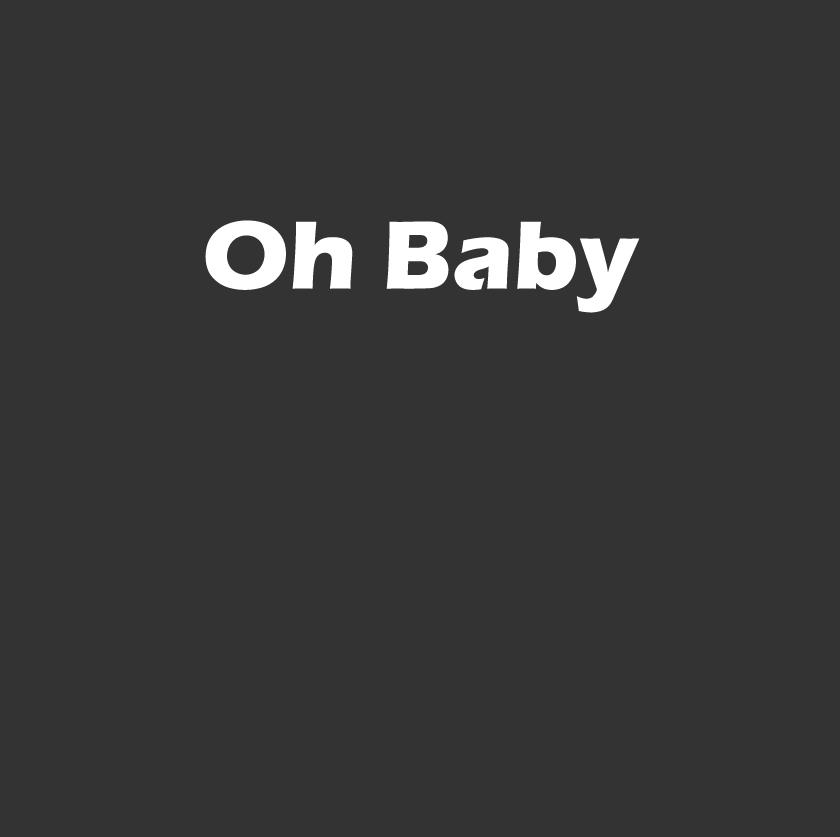
<style>
.page{position:relative;width:840px;height:837px;background:#333333}
.page>*{position:absolute;margin:0}
.t1{font:100px "ErasITC-Bold";color:#ffffff}
</style>
<div class="page">
<p class="t1" style="left:205px;top:220px;width:435px;height:93px">Oh Baby</p>
</div>
